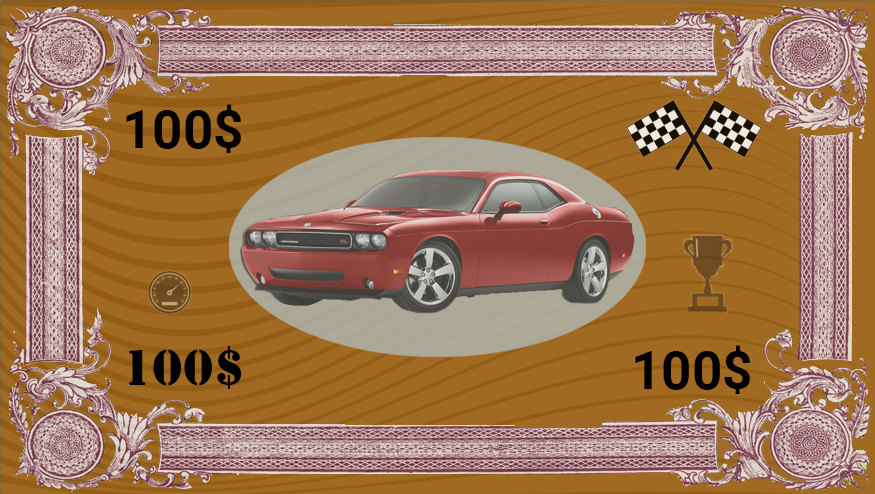
<style>
.page{position:relative;width:875px;height:494px;background:#a16a22}
.page>*{position:absolute;margin:0}
.t1{font:53.3px "Roboto-Bold";color:#000000}
.t2{font:53.3px "Stencil";color:#000000}
</style>
<div class="page">
<p class="t1" style="left:126px;top:104px;width:115px;height:49px">100$</p>
<p class="t2" style="left:129px;top:346px;width:113px;height:43px">100$</p>
<p class="t1" style="left:635px;top:345px;width:115px;height:49px">100$</p>
</div>
